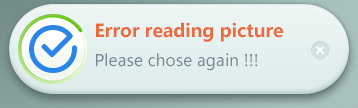
<style>
.page{position:relative;width:358px;height:108px}
.page>*{position:absolute;margin:0}
.t1{font:18px "MicrosoftYaHei-Bold";color:#ec6a3b}
.t2{font:16px "MicrosoftYaHei";color:#788c96}
</style>
<div class="page">
<p class="t1" style="left:96px;top:22px;width:187px;height:20px">Error reading picture</p>
<p class="t2" style="left:96px;top:53px;width:162px;height:18px">Please chose again !!!</p>
</div>
